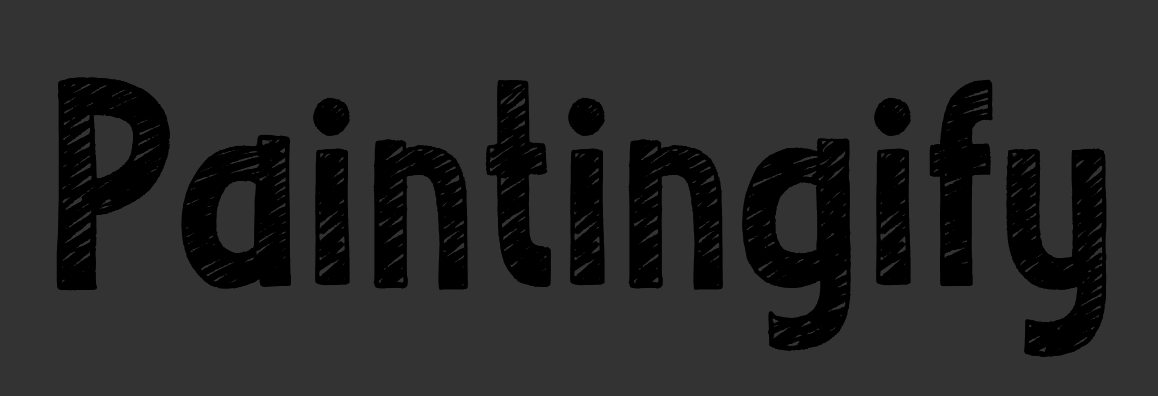
<style>
.page{position:relative;width:1158px;height:396px;background:#333333}
.page>*{position:absolute;margin:0}
.t1{font:300px "HolidayVibesFree-Regular";color:#000000}
</style>
<div class="page">
<p class="t1" style="left:56px;top:77px;width:1051px;height:280px">Paintingify</p>
</div>
